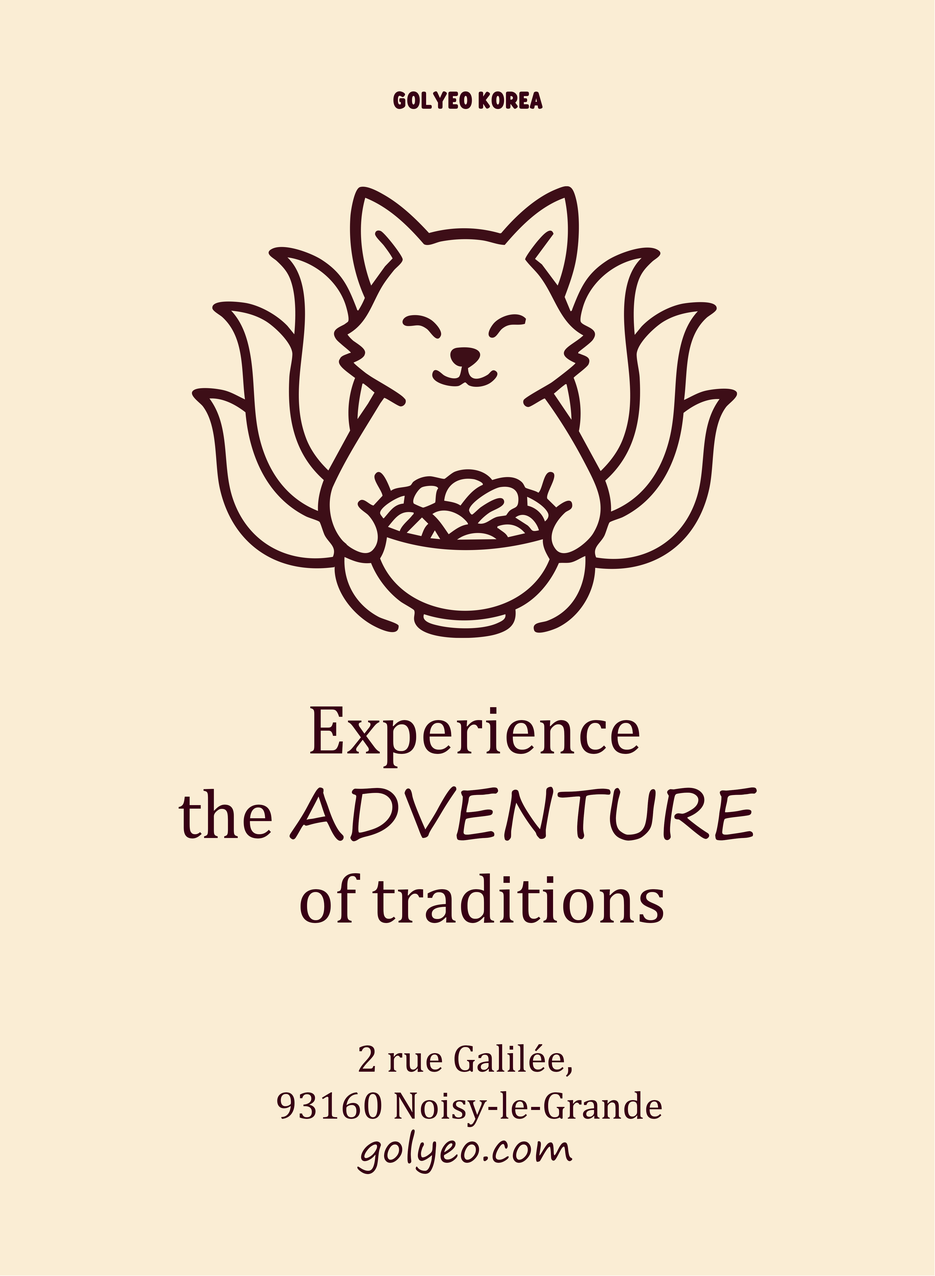
<style>
.page{position:relative;width:935px;height:1276px;background:#faedd4}
.page>*{position:absolute;margin:0}
.t1{font:24.5px "FredokaCondensed-Bold";color:#370014}
.t2{font:70.4px "CambriaMath";color:#370014}
.t3{font:70.4px "SegoePrint";color:#370014}
.t4{font:39.1px "CambriaMath";color:#370014}
.t5{font:39.1px "SegoePrint";color:#370014}
</style>
<div class="page">
<p class="t1" style="left:393px;top:91px;width:149px;height:18px">GOLYEO KOREA</p>
<p class="t2" style="left:178px;top:706px;width:579px;height:217px;text-align:center">Experience <br>the <span class="t3">ADVENTURE <br></span>of traditions</p>
<p class="t4" style="left:277px;top:1044px;width:385px;height:83px;text-align:center">2 rue Galilée, <br>93160 Noisy-le-Grande</p>
<p class="t5" style="left:357px;top:1129px;width:215px;height:45px">golyeo.com</p>
</div>
